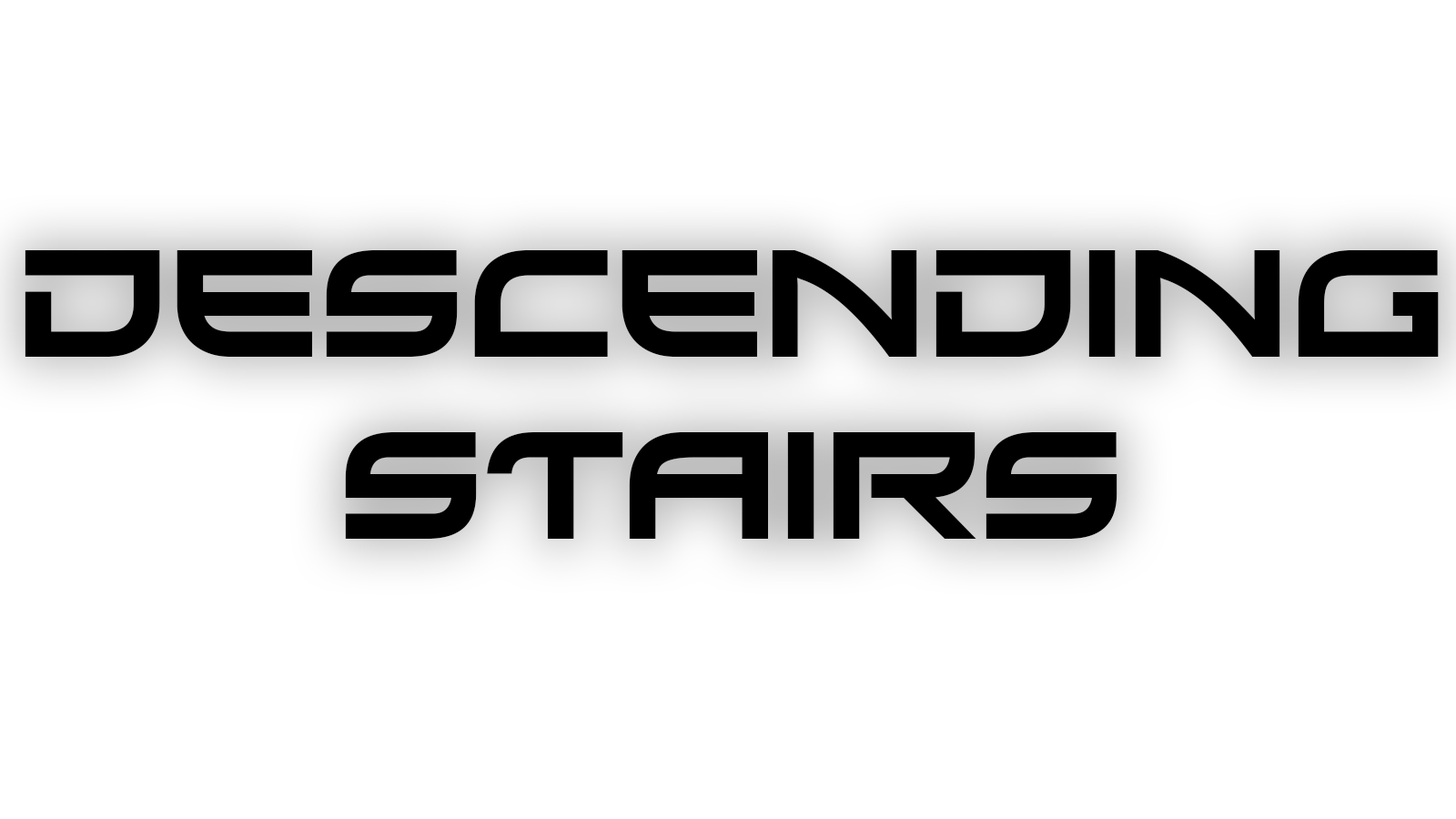
<style>
.page{position:relative;width:1456px;height:819px;background:#ffffff}
.page>*{position:absolute;margin:0}
.t1{font:151.7px "Xirod-Regular";color:#000000}
</style>
<div class="page">
<p class="t1" style="left:25px;top:250px;width:1414px;height:289px;text-align:center">Descending<br>Stairs</p>
</div>
